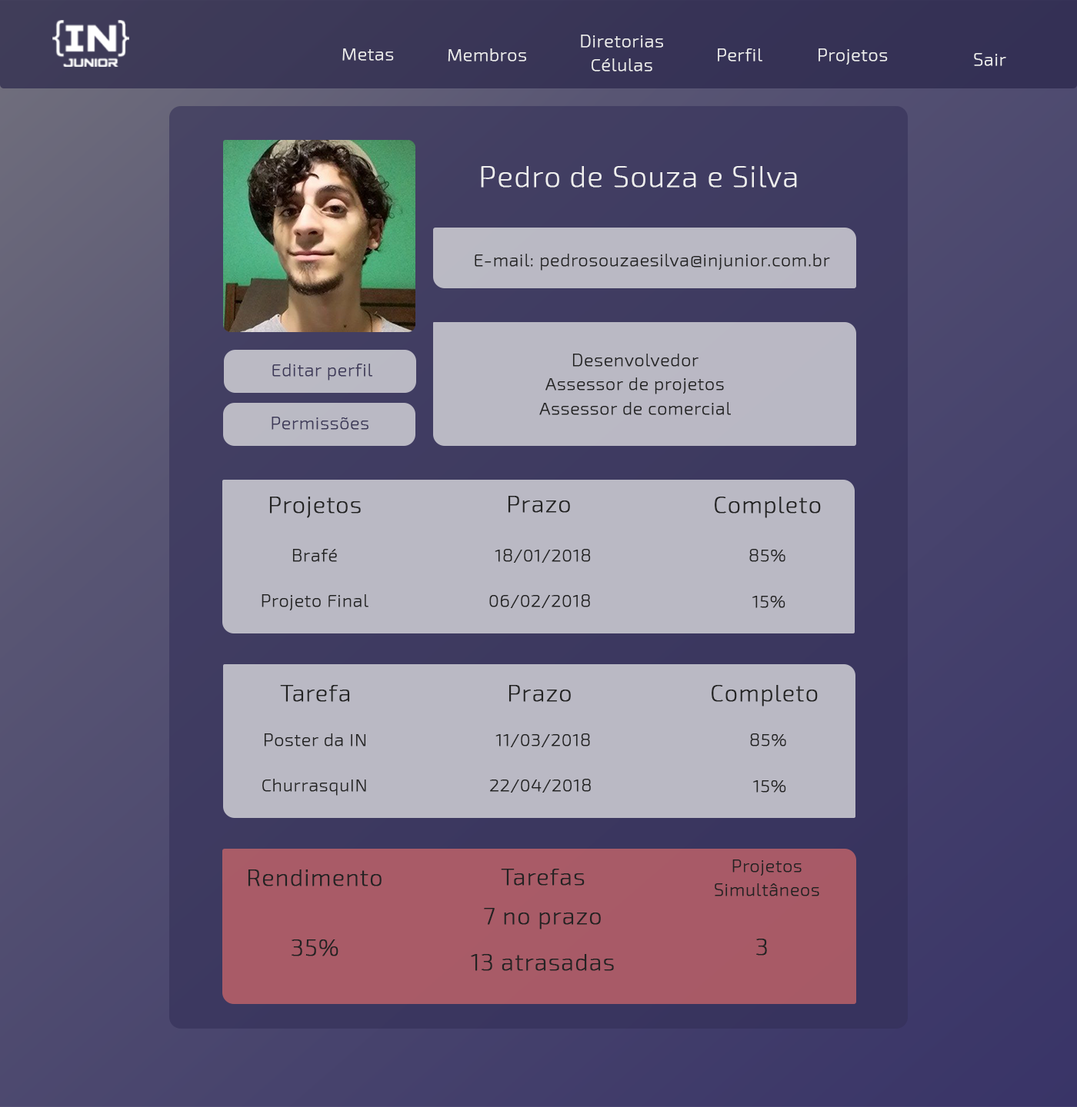
<style>
.page{position:relative;width:1077px;height:1107px}
.page>*{position:absolute;margin:0}
.t1{font:17.4px/24.1px "Exo2-ExtraLight";letter-spacing:0.025em;color:#eeeeee;font-weight:bold}
.t2{font:17.4px "Exo2-ExtraLight";letter-spacing:0.025em;color:#eeeeee;font-weight:bold}
.t3{font:29px "Exo2-ExtraLight";letter-spacing:0.025em;color:#eeeeee;font-weight:bold}
.t4{font:17.4px "Exo2-ExtraLight";letter-spacing:0.025em;color:#222222;font-weight:bold}
.t5{font:17.4px/24.1px "Exo2-ExtraLight";letter-spacing:0.025em;color:#222222;font-weight:bold}
.t6{font:17.4px "Exo2-ExtraLight";letter-spacing:0.025em;color:#3d3958;font-weight:bold}
.t7{font:23.2px "Exo2-ExtraLight";letter-spacing:0.025em;color:#222222;font-weight:bold}
.t8{font:23.2px/46.3px "Exo2-ExtraLight";letter-spacing:0.025em;color:#222222;font-weight:bold}
</style>
<div class="page">
<p class="t1" style="left:581px;top:35px;width:82px;height:37px;text-align:center">Diretorias<br>Células</p>
<p class="t2" style="left:342px;top:48px;width:52px;height:13px">Metas</p>
<p class="t2" style="left:448px;top:48px;width:78px;height:14px">Membros</p>
<p class="t2" style="left:718px;top:48px;width:44px;height:14px">Perfil</p>
<p class="t2" style="left:818px;top:48px;width:70px;height:17px">Projetos</p>
<p class="t2" style="left:974px;top:53px;width:32px;height:13px">Sair</p>
<p class="t3" style="left:481px;top:166px;width:316px;height:22px">Pedro de Souza e Silva</p>
<p class="t4" style="left:475px;top:254px;width:355px;height:17px">E-mail: pedrosouzaesilva@injunior.com.br</p>
<p class="t5" style="left:539px;top:354px;width:192px;height:61px;text-align:center">Desenvolvedor<br>Assessor de projetos<br>Assessor de comercial</p>
<p class="t6" style="left:272px;top:364px;width:100px;height:17px">Editar perfil</p>
<p class="t6" style="left:271px;top:417px;width:97px;height:13px">Permissões</p>
<p class="t7" style="left:269px;top:497px;width:92px;height:21px">Projetos</p>
<p class="t7" style="left:508px;top:496px;width:62px;height:17px">Prazo</p>
<p class="t7" style="left:714px;top:497px;width:107px;height:21px">Completo</p>
<p class="t4" style="left:292px;top:549px;width:45px;height:13px">Brafé</p>
<p class="t4" style="left:495px;top:549px;width:96px;height:14px">18/01/2018</p>
<p class="t4" style="left:749px;top:549px;width:36px;height:13px">85%</p>
<p class="t4" style="left:261px;top:594px;width:107px;height:17px">Projeto Final</p>
<p class="t4" style="left:489px;top:594px;width:101px;height:14px">06/02/2018</p>
<p class="t4" style="left:752px;top:596px;width:33px;height:12px">15%</p>
<p class="t7" style="left:280px;top:685px;width:70px;height:17px">Tarefa</p>
<p class="t7" style="left:508px;top:685px;width:63px;height:17px">Prazo</p>
<p class="t7" style="left:711px;top:685px;width:107px;height:22px">Completo</p>
<p class="t4" style="left:264px;top:734px;width:102px;height:13px">Poster da IN</p>
<p class="t4" style="left:495px;top:734px;width:95px;height:14px">11/03/2018</p>
<p class="t4" style="left:750px;top:734px;width:36px;height:13px">85%</p>
<p class="t4" style="left:262px;top:779px;width:104px;height:17px">ChurrasquIN</p>
<p class="t4" style="left:490px;top:779px;width:101px;height:14px">22/04/2018</p>
<p class="t4" style="left:753px;top:781px;width:33px;height:12px">15%</p>
<p class="t7" style="left:248px;top:870px;width:133px;height:17px">Rendimento</p>
<p class="t7" style="left:501px;top:869px;width:84px;height:17px">Tarefas</p>
<p class="t5" style="left:714px;top:860px;width:105px;height:37px;text-align:center">Projetos<br>Simultâneos</p>
<p class="t8" style="left:471px;top:908px;width:143px;height:63px;text-align:center">7 no prazo<br>13 atrasadas</p>
<p class="t7" style="left:291px;top:940px;width:47px;height:17px">35%</p>
<p class="t7" style="left:756px;top:939px;width:11px;height:17px">3</p>
</div>
